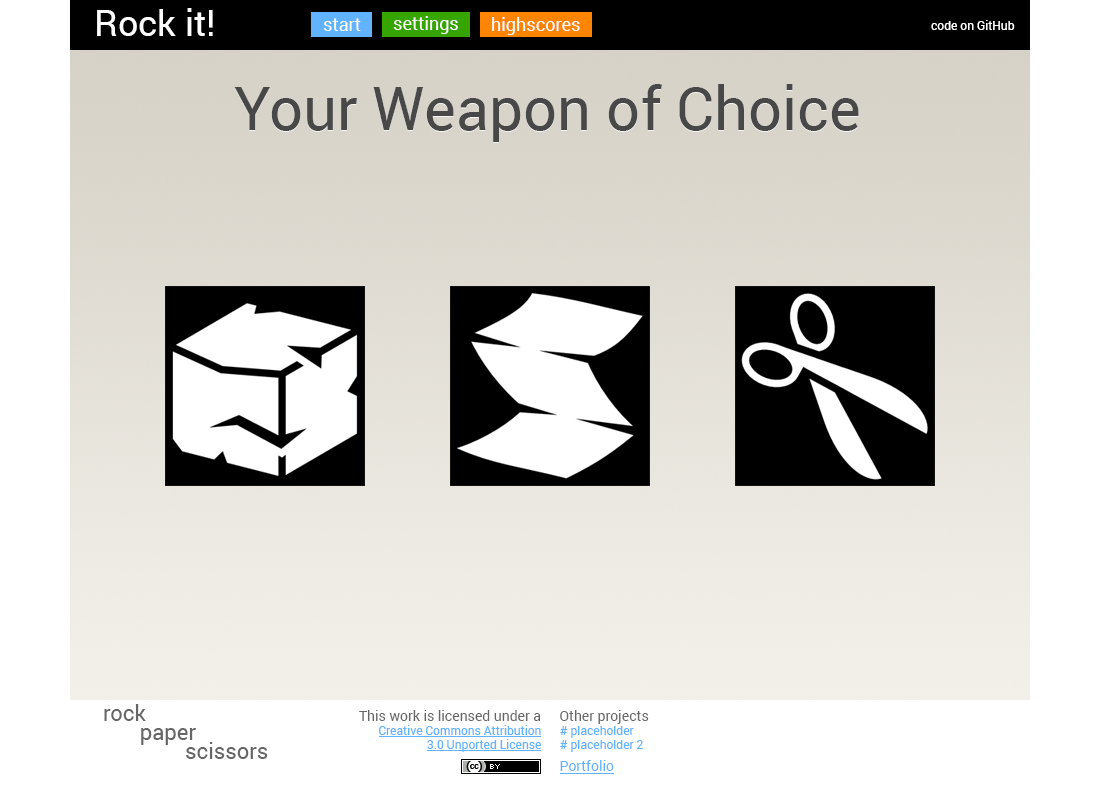
<style>
.page{position:relative;width:1100px;height:800px;background:#ffffff}
.page>*{position:absolute;margin:0}
.t1{font:36px "Roboto-Regular";color:#fffefe}
.t2{font:18px "Roboto-Regular";color:#fffefe}
.t3{font:12px "Roboto-Regular";color:#fffefe}
.t4{font:60px "Roboto-Regular";color:#484848}
.t5{font:22px "Roboto-Regular";color:#666666}
.t6{font:14px "Roboto-Regular";color:#666666}
.t7{font:12px "Roboto-Regular";color:#61b3ff}
.t8{font:14px "Roboto-Regular";color:#61b3ff}
</style>
<div class="page">
<p class="t1" style="left:97px;top:8px;width:116px;height:28px">Rock it!</p>
<p class="t2" style="left:393px;top:16px;width:65px;height:18px">settings</p>
<p class="t2" style="left:492px;top:17px;width:88px;height:18px">highscores</p>
<p class="t2" style="left:323px;top:18px;width:38px;height:13px">start</p>
<p class="t3" style="left:931px;top:20px;width:84px;height:10px">code on GitHub</p>
<p class="t4" style="left:234px;top:84px;width:625px;height:58px">Your Weapon of Choice</p>
<p class="t5" style="left:104px;top:704px;width:42px;height:17px">rock</p>
<p class="t6" style="left:359px;top:710px;width:182px;height:11px">This work is licensed under a</p>
<p class="t6" style="left:560px;top:710px;width:89px;height:14px">Other projects</p>
<p class="t7" style="left:379px;top:725px;width:162px;height:27px;text-align:right">Creative Commons Attribution 3.0 Unported License</p>
<p class="t7" style="left:560px;top:726px;width:83px;height:26px"># placeholder<br># placeholder 2</p>
<p class="t5" style="left:141px;top:728px;width:55px;height:17px">paper</p>
<p class="t5" style="left:186px;top:742px;width:82px;height:17px">scissors</p>
<p class="t8" style="left:560px;top:760px;width:54px;height:11px">Portfolio</p>
</div>
